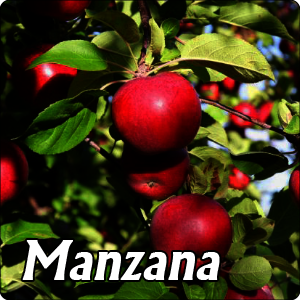
<style>
.page{position:relative;width:300px;height:300px}
.page>*{position:absolute;margin:0}
.t1{font:55.6px "Narkisim";color:#ffffff;font-weight:bold;font-style:italic}
</style>
<div class="page">
<p class="t1" style="left:22px;top:240px;width:198px;height:40px">Manzana</p>
</div>
